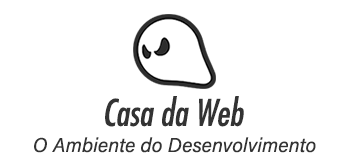
<style>
.page{position:relative;width:350px;height:164px;background:#ffffff}
.page>*{position:absolute;margin:0}
.t1{font:36px "FujiyamaItalic";color:#333333}
.t2{font:20px "AcuminConcept-Italic";color:#333333}
</style>
<div class="page">
<p class="t1" style="left:105px;top:96px;width:139px;height:31px">Casa da Web</p>
<p class="t2" style="left:34px;top:137px;width:282px;height:16px">O Ambiente do Desenvolvimento</p>
</div>
